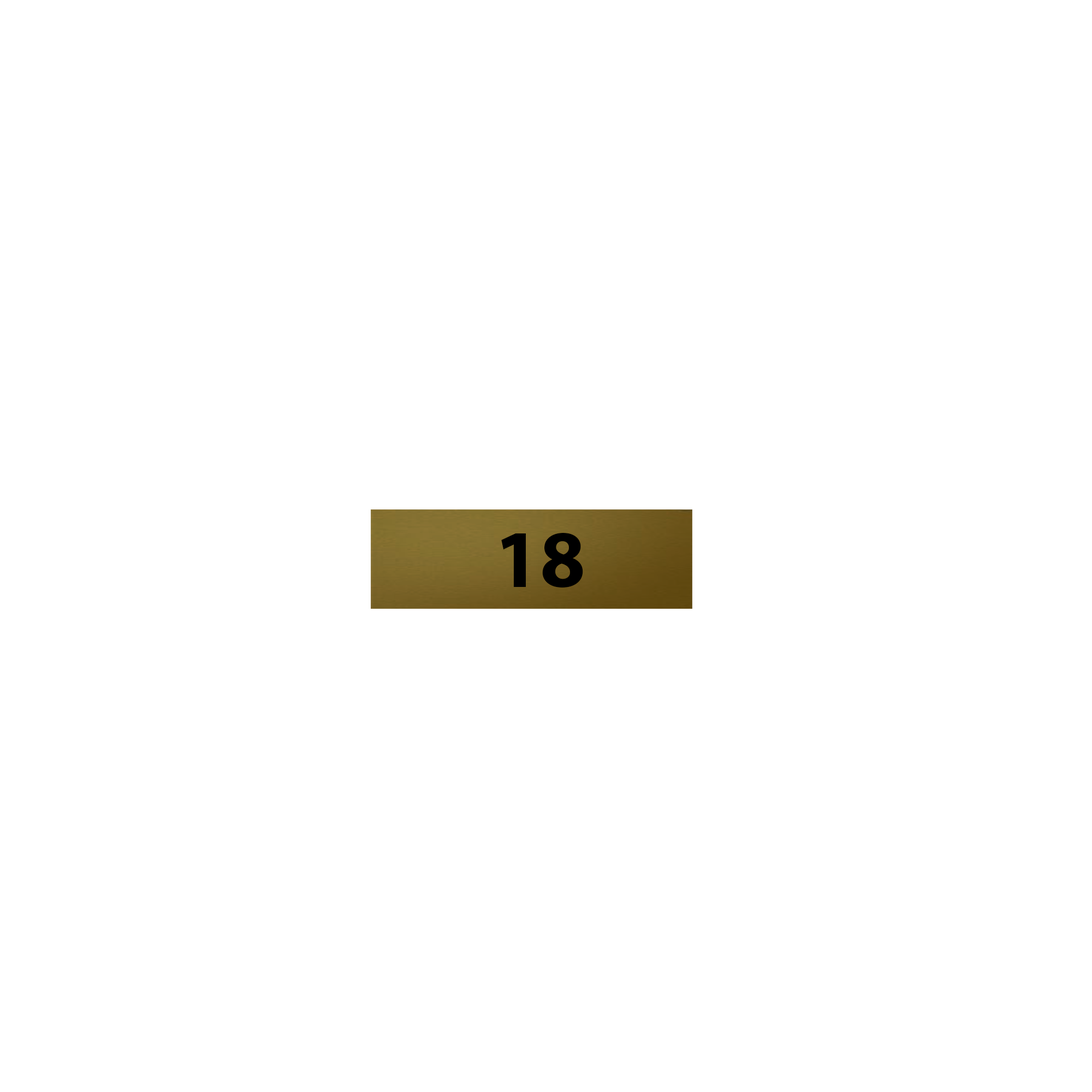
<style>
.page{position:relative;width:1092px;height:1092px;background:#ffffff}
.page>*{position:absolute;margin:0}
.t1{font:81.9px "MyriadPro-Bold";color:#000000}
</style>
<div class="page">
<p class="t1" style="left:501px;top:533px;width:82px;height:54px">18</p>
</div>
